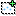
<style>
.page{position:relative;width:16px;height:16px;background:#ffffff}
.page>*{position:absolute;margin:0}
.t1{font:8px "Verdana-Bold";letter-spacing:0.04em;color:#56f06b}
</style>
<div class="page">
<p class="t1" style="left:10px;top:1px;width:5px;height:5px">+</p>
</div>
